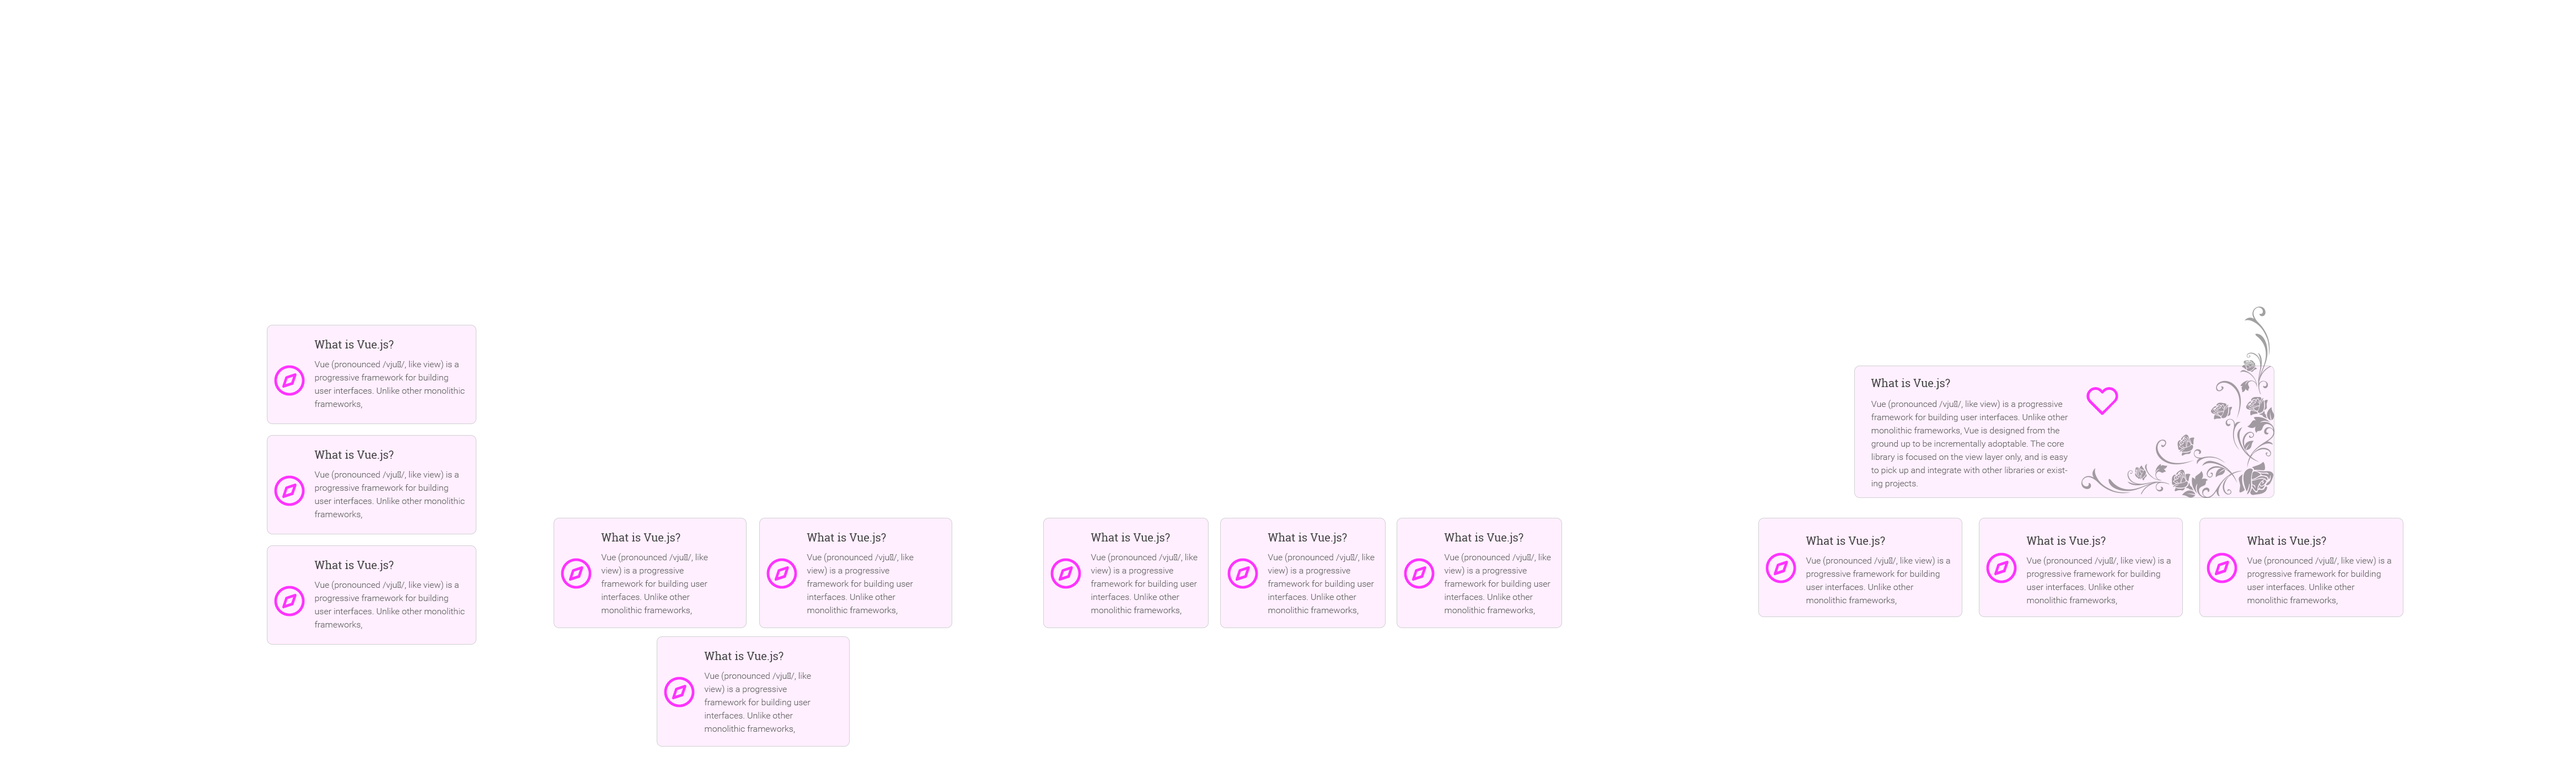
<style>
.page{position:relative;width:2576px;height:772px;background:#ffffff}
.page>*{position:absolute;margin:0}
.t1{font:8.8px/13.2px "Roboto-Light";color:#666666}
.t2{font:11px/17.1px "RobotoSlab-Regular";color:#444444}
.t3{font:11px "RobotoSlab-Regular";color:#444444}
</style>
<div class="page">
<p class="t1" style="left:314px;top:340px;width:151px;height:69px"><span class="t2">What is Vue.js?<br></span>Vue (pronounced /vjuː/, like view) is a progressive framework for building user interfaces. Unlike other monolithic frameworks,</p>
<p class="t3" style="left:1871px;top:378px;width:79px;height:11px">What is Vue.js?</p>
<p class="t1" style="left:1871px;top:400px;width:197px;height:88px">Vue (pronounced /vjuː/, like view) is a progressive framework for building user interfaces. Unlike other monolithic frameworks, Vue is designed from the ground up to be incrementally adoptable. The core library is focused on the view layer only, and is easy to pick up and integrate with other libraries or existing projects.</p>
<p class="t1" style="left:314px;top:450px;width:151px;height:69px"><span class="t2">What is Vue.js?<br></span>Vue (pronounced /vjuː/, like view) is a progressive framework for building user interfaces. Unlike other monolithic frameworks,</p>
<p class="t1" style="left:601px;top:533px;width:107px;height:82px"><span class="t2">What is Vue.js?<br></span>Vue (pronounced /vjuː/, like view) is a progressive framework for building user interfaces. Unlike other monolithic frameworks,</p>
<p class="t1" style="left:807px;top:533px;width:107px;height:82px"><span class="t2">What is Vue.js?<br></span>Vue (pronounced /vjuː/, like view) is a progressive framework for building user interfaces. Unlike other monolithic frameworks,</p>
<p class="t1" style="left:1091px;top:533px;width:107px;height:82px"><span class="t2">What is Vue.js?<br></span>Vue (pronounced /vjuː/, like view) is a progressive framework for building user interfaces. Unlike other monolithic frameworks,</p>
<p class="t1" style="left:1268px;top:533px;width:107px;height:82px"><span class="t2">What is Vue.js?<br></span>Vue (pronounced /vjuː/, like view) is a progressive framework for building user interfaces. Unlike other monolithic frameworks,</p>
<p class="t1" style="left:1444px;top:533px;width:107px;height:82px"><span class="t2">What is Vue.js?<br></span>Vue (pronounced /vjuː/, like view) is a progressive framework for building user interfaces. Unlike other monolithic frameworks,</p>
<p class="t1" style="left:1806px;top:536px;width:144px;height:69px"><span class="t2">What is Vue.js?<br></span>Vue (pronounced /vjuː/, like view) is a progressive framework for building user interfaces. Unlike other monolithic frameworks,</p>
<p class="t1" style="left:2026px;top:536px;width:145px;height:69px"><span class="t2">What is Vue.js?<br></span>Vue (pronounced /vjuː/, like view) is a progressive framework for building user interfaces. Unlike other monolithic frameworks,</p>
<p class="t1" style="left:2247px;top:536px;width:144px;height:69px"><span class="t2">What is Vue.js?<br></span>Vue (pronounced /vjuː/, like view) is a progressive framework for building user interfaces. Unlike other monolithic frameworks,</p>
<p class="t1" style="left:314px;top:560px;width:151px;height:69px"><span class="t2">What is Vue.js?<br></span>Vue (pronounced /vjuː/, like view) is a progressive framework for building user interfaces. Unlike other monolithic frameworks,</p>
<p class="t1" style="left:704px;top:651px;width:107px;height:82px"><span class="t2">What is Vue.js?<br></span>Vue (pronounced /vjuː/, like view) is a progressive framework for building user interfaces. Unlike other monolithic frameworks,</p>
</div>
